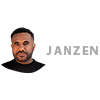
<style>
.page{position:relative;width:100px;height:100px;background:#ffffff}
.page>*{position:absolute;margin:0}
.t1{font:12.7px "MyriadPro-Bold";letter-spacing:0.1em;color:#a6a6a6;text-transform:uppercase}
</style>
<div class="page">
<p class="t1" style="left:46px;top:46px;width:52px;height:9px">JANZEN</p>
</div>
